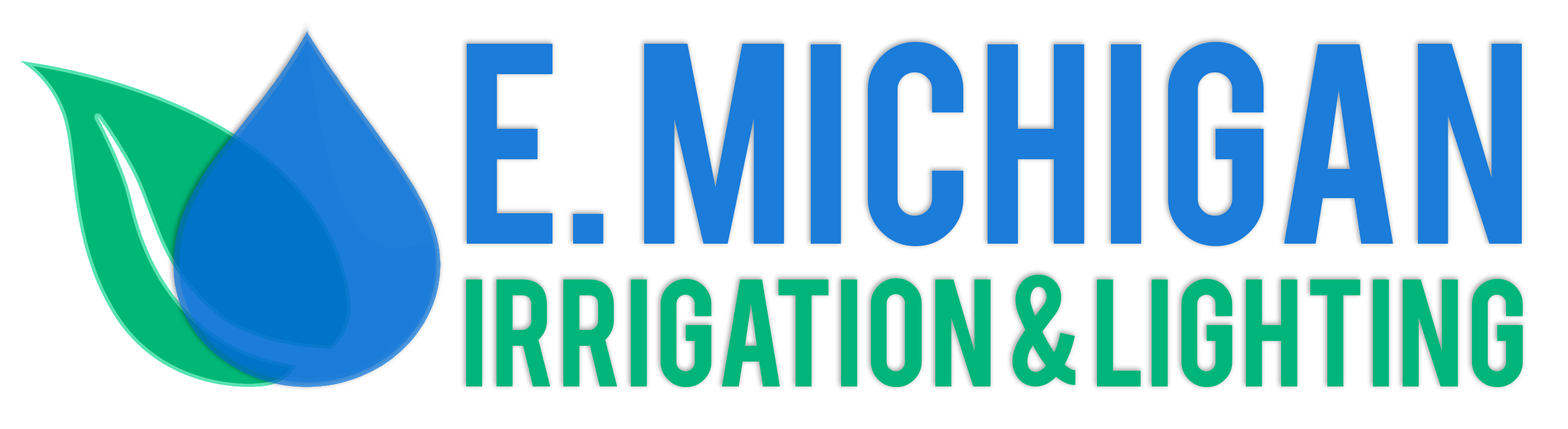
<style>
.page{position:relative;width:1568px;height:429px;background:#ffffff}
.page>*{position:absolute;margin:0}
.t1{font:118.9px "Bebas";color:#00b57a}
.t2{font:224.3px "Bebas";color:#1b7cd9}
</style>
<div class="page">
<p class="t1" style="left:466px;top:42px;width:1057px;height:345px;text-align:center"><span class="t2">E. Michigan<br></span>Irrigation &amp; Lighting</p>
</div>
